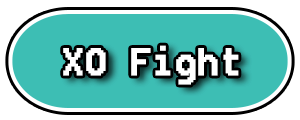
<style>
.page{position:relative;width:300px;height:120px;background:#3dbeb4}
.page>*{position:absolute;margin:0}
.t1{font:36px "Fixedsys";color:#ffffff;font-weight:bold}
</style>
<div class="page">
<p class="t1" style="left:63px;top:45px;width:176px;height:40px">XO Fight</p>
</div>
